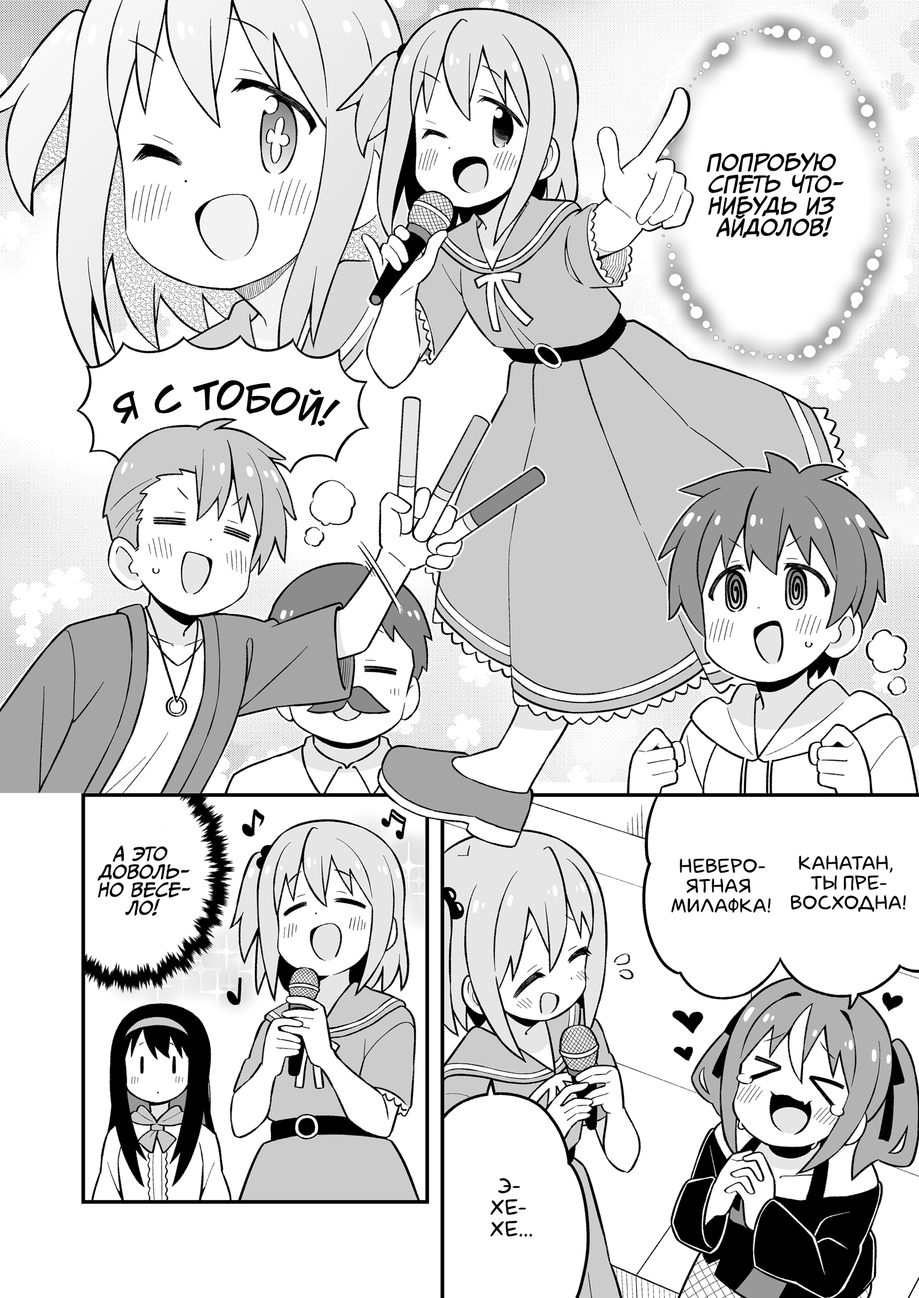
<style>
.page{position:relative;width:919px;height:1298px;background:#ffffff}
.page>*{position:absolute;margin:0}
.t1{font:21.6px "CCMeanwhile";color:#000000;text-transform:uppercase;font-style:italic}
.t2{font:36.1px "v_CCJeffCampbell";color:#000000;text-transform:uppercase}
.t3{font:18px "CCMeanwhile";color:#000000;text-transform:uppercase;font-style:italic}
.t4{font:19.8px "laCartoonerie";color:#000000;text-transform:uppercase}
.t5{font:21.6px "laCartoonerie";color:#000000;text-transform:uppercase}
</style>
<div class="page">
<p class="t1" style="left:707px;top:152px;width:137px;height:86px;text-align:center">Попробую<br>спеть что-<br>нибудь из<br>айдолов!</p>
<p class="t2" style="left:113px;top:380px;width:227px;height:47px;rotate:1deg">Я с тобой!</p>
<p class="t3" style="left:97px;top:845px;width:93px;height:71px;text-align:center">А это<br>доволь-<br>но весе-<br>ло!</p>
<p class="t4" style="left:791px;top:855px;width:115px;height:57px;text-align:center">Канатан,<br>ты пре-<br>восходна!</p>
<p class="t4" style="left:671px;top:858px;width:99px;height:55px;text-align:center">Неверо-<br>ятная<br>милафка!</p>
<p class="t5" style="left:490px;top:1178px;width:42px;height:59px;text-align:center">Э-<br>хе-<br>хе...</p>
</div>
